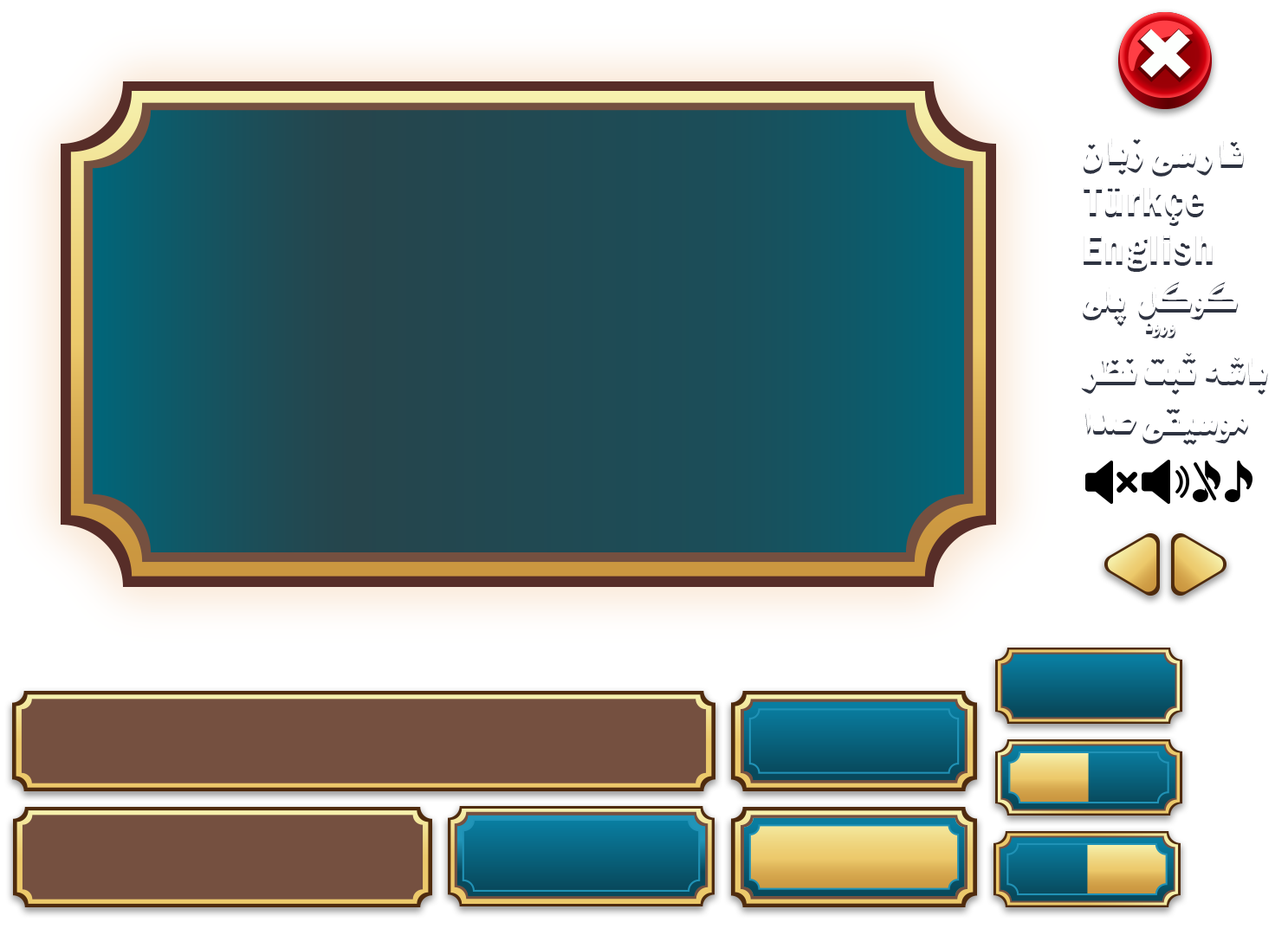
<style>
.page{position:relative;width:1275px;height:935px;background:#ffffff}
.page>*{position:absolute;margin:0}
.t1{font:43.3px "SultanKBold";letter-spacing:0.05em}
.t2{font:43.3px "FranklinGothic-DemiCond";letter-spacing:0.05em}
.t3{font:39.7px/28.9px "SultanKBold";letter-spacing:0.03em}
.t4{font:21.7px/21.7px "SultanKBold";letter-spacing:0.05em}
.t5{font:43.3px "SultanKBold"}
</style>
<div class="page">
<p class="t1" style="left:1083px;top:137px;width:60px;height:38px">زبان</p>
<p class="t1" style="left:1152px;top:139px;width:92px;height:38px">فارسی</p>
<p class="t2" style="left:1083px;top:188px;width:121px;height:38px">Türkçe</p>
<p class="t2" style="left:1083px;top:236px;width:129px;height:36px">English</p>
<p class="t3" style="left:1083px;top:281px;width:155px;height:58px;text-align:center">گوگل پلی<br><span class="t4">ورود</span></p>
<p class="t5" style="left:1081px;top:351px;width:115px;height:44px">ثبت نظر</p>
<p class="t5" style="left:1206px;top:356px;width:62px;height:39px">باشه</p>
<p class="t5" style="left:1085px;top:407px;width:51px;height:28px">صدا</p>
<p class="t5" style="left:1142px;top:407px;width:106px;height:38px">موسیقی</p>
</div>
